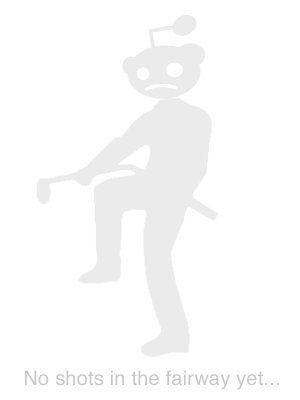
<style>
.page{position:relative;width:300px;height:400px;background:#ffffff}
.page>*{position:absolute;margin:0}
.t1{font:20px "Helvetica";letter-spacing:0.01em;color:#c8c8c8}
</style>
<div class="page">
<p class="t1" style="left:25px;top:370px;width:254px;height:20px">No shots in the fairway yet...</p>
</div>
